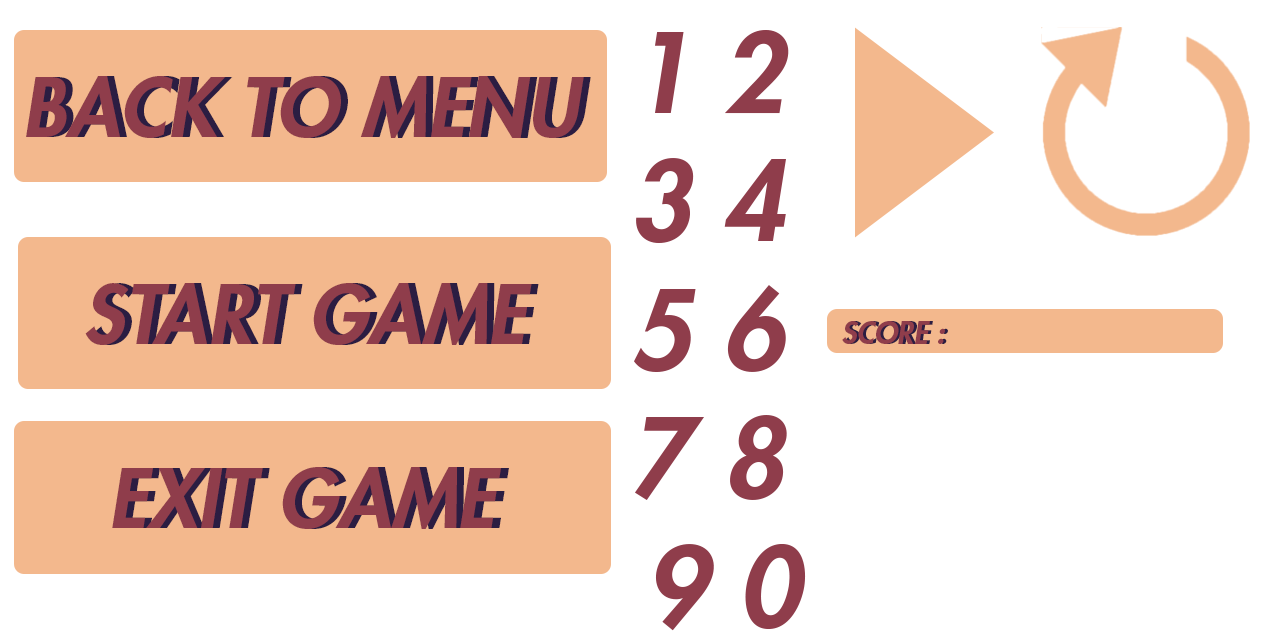
<style>
.page{position:relative;width:1270px;height:644px;background:#ffffff}
.page>*{position:absolute;margin:0}
.t1{font:107.2px "FuturaStd-HeavyOblique";color:#8f3d4b}
.t2{font:79.5px "FuturaStd-HeavyOblique";color:#8f3d4b}
.t3{font:79.5px "FuturaStd-HeavyOblique"}
.t4{font:29.3px "FuturaStd-HeavyOblique";color:#8f3d4b}
.t5{font:29.3px "FuturaStd-HeavyOblique"}
.t6{font:80.1px "FuturaStd-HeavyOblique";color:#8f3d4b}
.t7{font:80.1px "FuturaStd-HeavyOblique"}
</style>
<div class="page">
<p class="t1" style="left:634px;top:30px;width:172px;height:601px;text-align:center">1 2 <br>3 4 <br>5 6 <br>7 8 <br>9 0</p>
<p class="t2" style="left:26px;top:76px;width:558px;height:62px">BACK TO MENU</p>
<p class="t3" style="left:33px;top:76px;width:558px;height:62px">BACK TO MENU</p>
<p class="t2" style="left:85px;top:283px;width:447px;height:62px">START GAME</p>
<p class="t3" style="left:92px;top:283px;width:447px;height:62px">START GAME</p>
<p class="t4" style="left:842px;top:321px;width:103px;height:23px">SCORE :</p>
<p class="t5" style="left:845px;top:321px;width:103px;height:23px">SCORE :</p>
<p class="t6" style="left:112px;top:467px;width:389px;height:62px">EXIT GAME</p>
<p class="t7" style="left:119px;top:467px;width:390px;height:62px">EXIT GAME</p>
</div>
